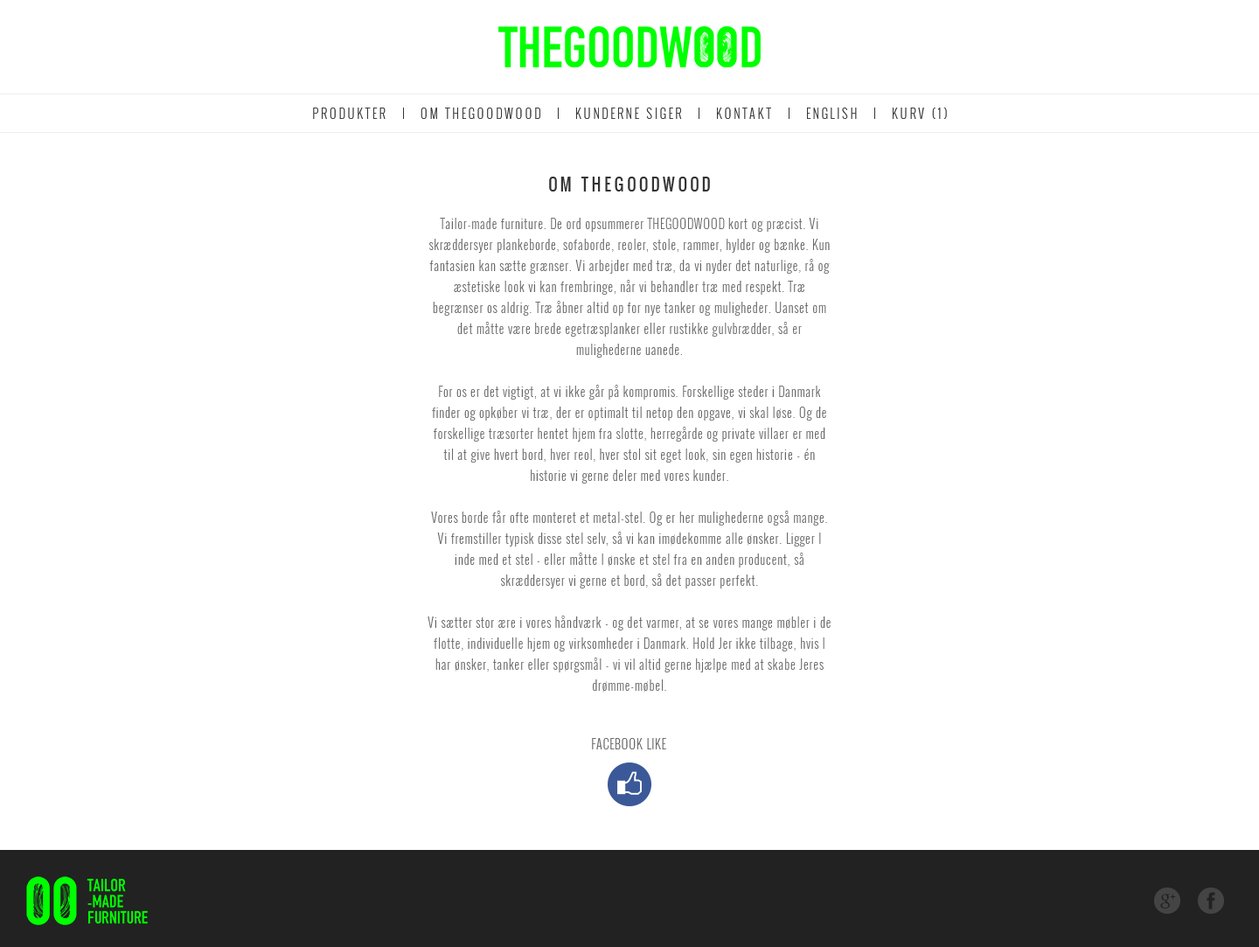
<style>
.page{position:relative;width:1259px;height:947px;background:#ffffff}
.page>*{position:absolute;margin:0}
.t1{font:15.7px "Oswald-Regular";letter-spacing:0.2em;color:#333333;text-transform:uppercase}
.t2{font:12.2px/21px "Oswald-Light";letter-spacing:0.05em;color:#666666}
</style>
<div class="page">
<p class="t1" style="left:549px;top:177px;width:161px;height:14px">OM THEGOODWOOD</p>
<p class="t2" style="left:428px;top:218px;width:403px;height:475px;text-align:center">Tailor-made furniture. De ord opsummerer THEGOODWOOD kort og præcist. Vi skræddersyer plankeborde, sofaborde, reoler, stole, rammer, hylder og bænke. Kun fantasien kan sætte grænser. Vi arbejder med træ, da vi nyder det naturlige, rå og æstetiske look vi kan frembringe, når vi behandler træ med respekt. Træ begrænser os aldrig. Træ åbner altid op for nye tanker og muligheder. Uanset om det måtte være brede egetræsplanker eller rustikke gulvbrædder, så er mulighederne uanede.<br><br>For os er det vigtigt, at vi ikke går på kompromis. Forskellige steder i Danmark finder og opkøber vi træ, der er optimalt til netop den opgave, vi skal løse. Og de forskellige træsorter hentet hjem fra slotte, herregårde og private villaer er med til at give hvert bord, hver reol, hver stol sit eget look, sin egen historie - én historie vi gerne deler med vores kunder.<br><br>Vores borde får ofte monteret et metal-stel. Og er her mulighederne også mange. Vi fremstiller typisk disse stel selv, så vi kan imødekomme alle ønsker. Ligger I inde med et stel - eller måtte I ønske et stel fra en anden producent, så skræddersyer vi gerne et bord, så det passer perfekt.<br><br>Vi sætter stor ære i vores håndværk - og det varmer, at se vores mange møbler i de flotte, individuelle hjem og virksomheder i Danmark. Hold Jer ikke tilbage, hvis I har ønsker, tanker eller spørgsmål - vi vil altid gerne hjælpe med at skabe Jeres drømme-møbel.</p>
</div>
